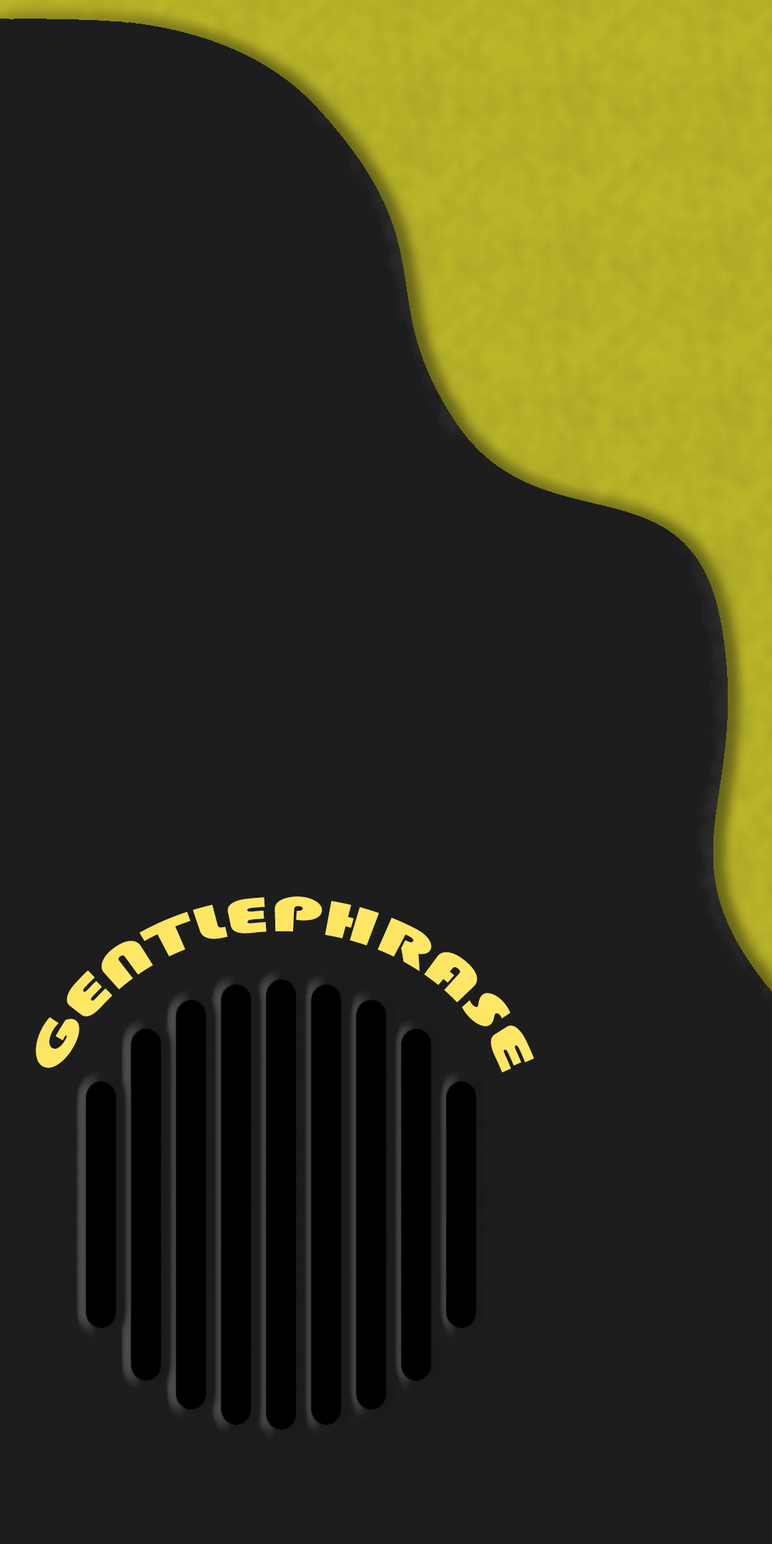
<style>
.page{position:relative;width:772px;height:1544px;background:#1d1d1d}
.page>*{position:absolute;margin:0}
.t1{font:51.5px/19.6px "Bauhaus93";color:#ffe763}
</style>
<div class="page">
<p class="t1" style="left:36px;top:897px;width:498px;height:176px;text-align:center">GENTLEPHRASE</p>
</div>
